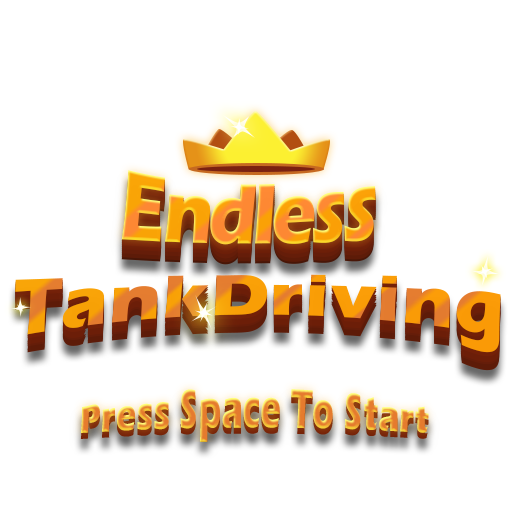
<style>
.page{position:relative;width:512px;height:512px;background:#ffffff}
.page>*{position:absolute;margin:0}
.t1{font:105.4px "ErasITC-Bold";letter-spacing:-0.05em;scale:0.69 1}
.t2{font:86.2px "ErasITC-Bold";letter-spacing:0.025em;scale:0.87 1}
.t3{font:38.3px "ErasITC-Bold";letter-spacing:0.025em;scale:0.87 1}
</style>
<div class="page">
<p class="t1" style="left:121px;top:170px;width:255px;height:75px">Endless</p>
<p class="t2" style="left:15px;top:274px;width:486px;height:79px">TankDriving</p>
<p class="t3" style="left:80px;top:389px;width:349px;height:53px">Press Space To Start</p>
</div>
